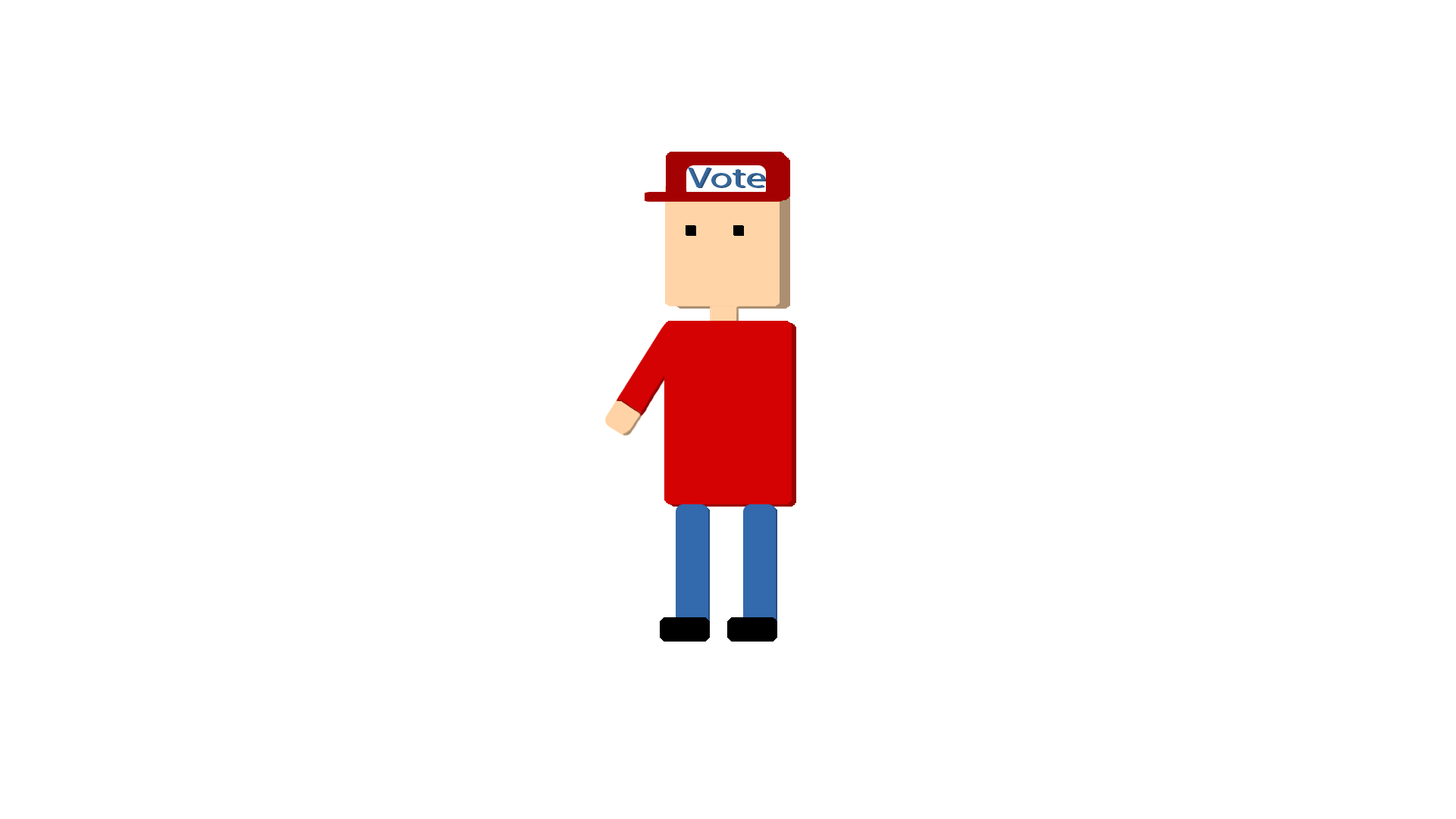
<style>
.page{position:relative;width:1456px;height:819px;background:#ffffff}
.page>*{position:absolute;margin:0}
.t1{font:28.4px "MyriadPro-Regular";color:#35689c;scale:1.44 1}
.t2{font:28.4px "MyriadPro-Regular";scale:1.44 1}
</style>
<div class="page">
<p class="t1" style="left:688px;top:168px;width:76px;height:19px">Vote</p>
<p class="t2" style="left:689px;top:168px;width:77px;height:20px">Vote</p>
</div>
